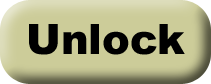
<style>
.page{position:relative;width:211px;height:84px;background:#cccc99}
.page>*{position:absolute;margin:0}
.t1{font:41.7px "Arial-Black";color:#000000}
</style>
<div class="page">
<p class="t1" style="left:29px;top:24px;width:156px;height:31px">Unlock</p>
</div>
